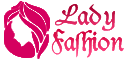
<style>
.page{position:relative;width:128px;height:60px;background:#ffffff}
.page>*{position:absolute;margin:0}
.t1{font:26px "Dukeplus";color:#d01c54}
.t2{font:26px "Dukeplus"}
</style>
<div class="page">
<p class="t1" style="left:55px;top:4px;width:60px;height:27px">Lady</p>
<p class="t1" style="left:55px;top:4px;width:60px;height:27px">Lady</p>
<p class="t2" style="left:51px;top:28px;width:73px;height:30px">Fashion</p>
<p class="t2" style="left:51px;top:28px;width:73px;height:30px">Fashion</p>
</div>
